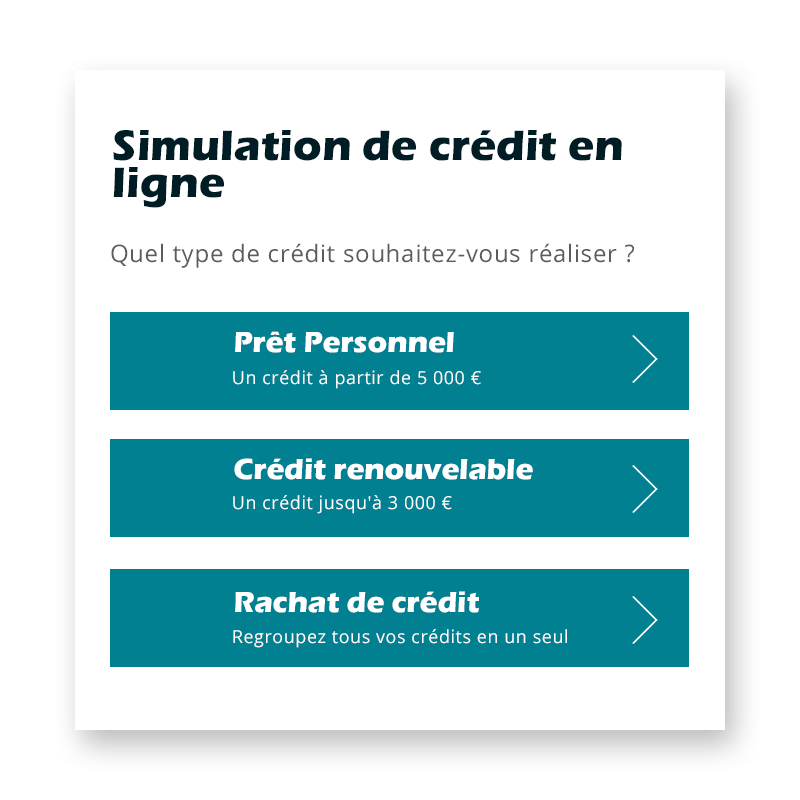
<style>
.page{position:relative;width:800px;height:800px;background:#ffffff}
.page>*{position:absolute;margin:0}
.t1{font:44px/37px "ErasITC-Bold";color:#001d26}
.t2{font:24px "OpenSans";letter-spacing:0.03em;color:#5b5c5e}
.t3{font:30px "ErasITC-Bold";color:#ffffff}
.t4{font:18px "OpenSans";letter-spacing:0.03em;color:#ffffff}
</style>
<div class="page">
<p class="t1" style="left:113px;top:130px;width:509px;height:78px">Simulation de crédit en ligne</p>
<p class="t2" style="left:111px;top:243px;width:523px;height:25px">Quel type de crédit souhaitez-vous réaliser ?</p>
<p class="t3" style="left:235px;top:331px;width:219px;height:22px">Prêt Personnel</p>
<p class="t4" style="left:233px;top:370px;width:248px;height:19px">Un crédit à partir de 5 000 €</p>
<p class="t3" style="left:234px;top:458px;width:299px;height:22px">Crédit renouvelable</p>
<p class="t4" style="left:233px;top:495px;width:219px;height:19px">Un crédit jusqu'à 3 000 €</p>
<p class="t3" style="left:235px;top:591px;width:244px;height:22px">Rachat de crédit</p>
<p class="t4" style="left:233px;top:629px;width:334px;height:19px">Regroupez tous vos crédits en un seul</p>
</div>
